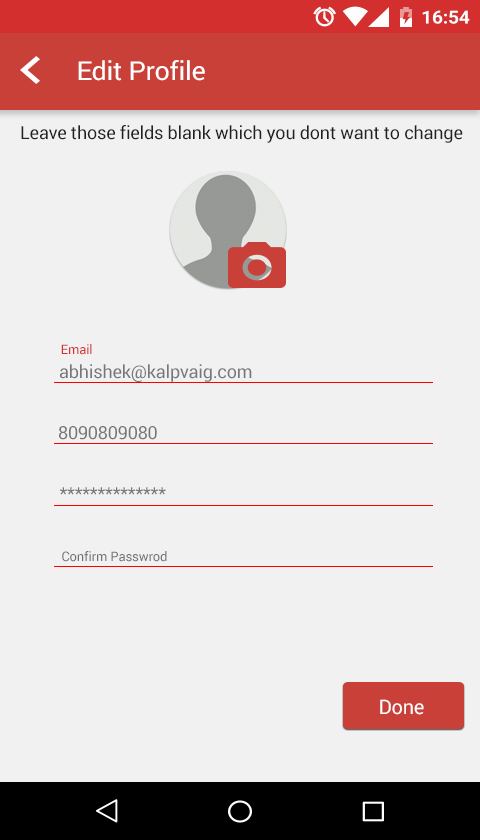
<style>
.page{position:relative;width:480px;height:840px;background:#f1f1f1}
.page>*{position:absolute;margin:0}
.t1{font:26.1px "Roboto-Regular";letter-spacing:-0.01em;color:#ffffff;scale:1.03 1}
.t2{font:18px "Roboto-Regular";letter-spacing:-0.01em;color:#212121}
.t3{font:13px "Roboto-Regular";letter-spacing:-0.01em;color:#d32f2f}
.t4{font:18px "Roboto-Regular";letter-spacing:-0.01em;color:#777777}
.t5{font:13px "Roboto-Regular";letter-spacing:-0.01em;color:#717171}
.t6{font:20px "Roboto-Regular";letter-spacing:-0.01em;color:#fefefe}
</style>
<div class="page">
<p class="t1" style="left:78px;top:60px;width:127px;height:21px">Edit Profile</p>
<p class="t2" style="left:21px;top:125px;width:442px;height:18px">Leave those fields blank which you dont want to change</p>
<p class="t3" style="left:61px;top:344px;width:31px;height:11px">Email</p>
<p class="t4" style="left:60px;top:364px;width:192px;height:18px">abhishek@kalpvaig.com</p>
<p class="t4" style="left:59px;top:426px;width:98px;height:14px">8090809080</p>
<p class="t4" style="left:59px;top:487px;width:107px;height:8px">**************</p>
<p class="t5" style="left:62px;top:551px;width:105px;height:11px">Confirm Passwrod</p>
<p class="t6" style="left:380px;top:699px;width:44px;height:16px">Done</p>
</div>
